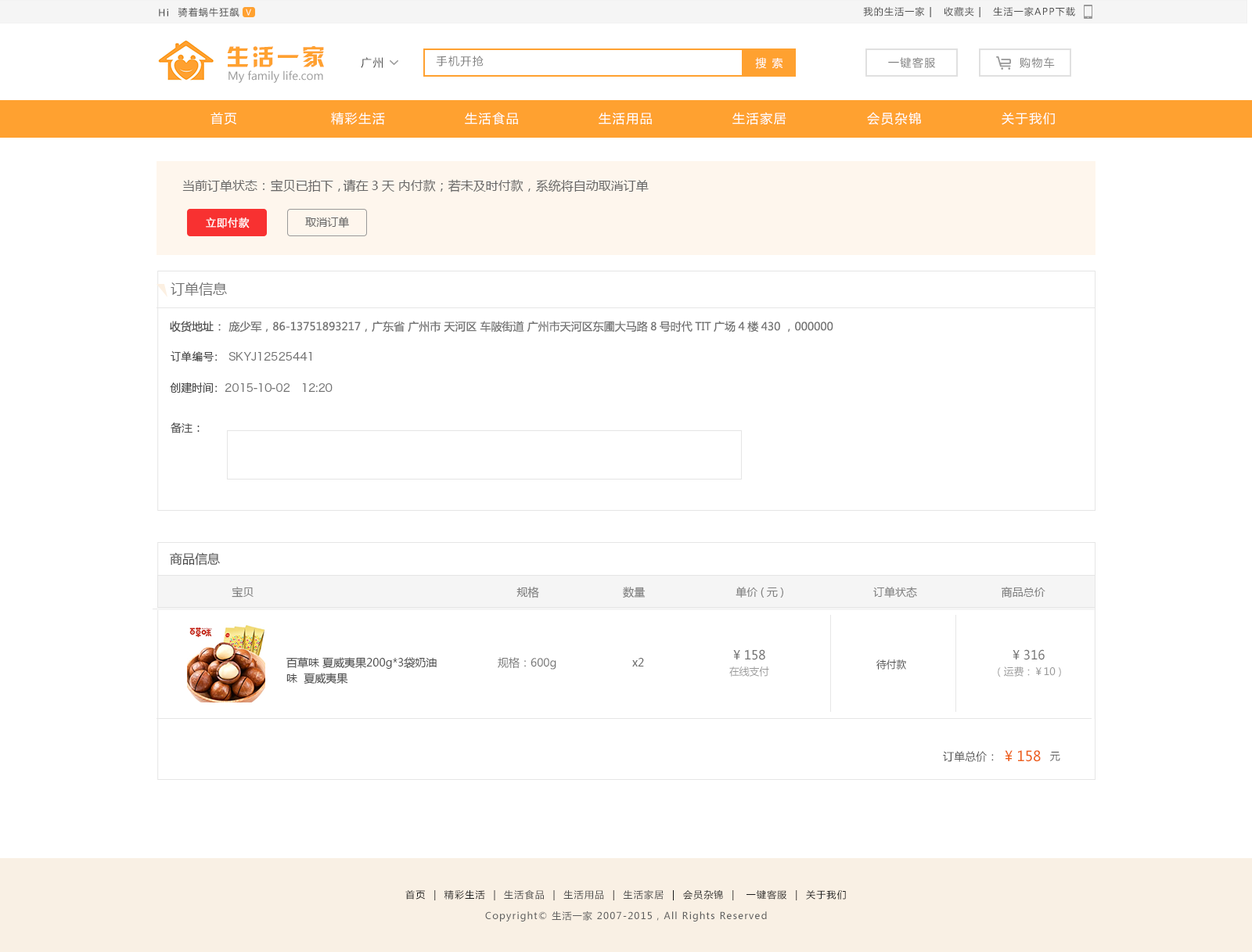
<style>
.page{position:relative;width:1252px;height:952px;background:#ffffff}
.page>*{position:absolute;margin:0}
.t1{font:9.4px "MicrosoftYaHei";letter-spacing:0.1em;color:#4d4d4d}
.t2{font:7.8px "MicrosoftYaHei";letter-spacing:0.1em;color:#ffffff}
.t3{font:22.7px "HYk2gj";letter-spacing:0.1em;color:#ffa130}
.t4{font:11px "MicrosoftYaHei";letter-spacing:0.1em;color:#4d4d4d}
.t5{font:11px "MicrosoftYaHei";letter-spacing:0.1em;color:#808080}
.t6{font:11px "MicrosoftYaHei";letter-spacing:0.1em;color:#ffffff}
.t7{font:11px "MicrosoftYaHei";color:#999999}
.t8{font:12.5px "MicrosoftYaHei";letter-spacing:0.1em;color:#ffffff}
.t9{font:12.9px "MicrosoftYaHei";letter-spacing:0.1em;color:#ffffff}
.t10{font:12.5px "MicrosoftYaHei";color:#666666}
.t11{font:11px "HiraginoSansGB-W3";color:#ffffff;font-weight:bold}
.t12{font:11px "MicrosoftYaHei";color:#666666}
.t13{font:14.1px "MicrosoftYaHei";color:#737373}
.t14{font:11px "MicrosoftYaHei";color:#737373}
.t15{font:11px "MicrosoftYaHei";color:#4d4d4d}
.t16{font:11px/31.3px "HiraginoSansGB-W3";color:#737373}
.t17{font:11px/31.3px "HiraginoSansGB-W3";color:#4d4d4d}
.t18{font:12.5px "MicrosoftYaHei";color:#4d4d4d}
.t19{font:11px "MicrosoftYaHei";color:#808080}
.t20{font:12.5px "MicrosoftYaHei";color:#737373}
.t21{font:11px/15.7px "MicrosoftYaHei";color:#4d4d4d}
.t22{font:11px "MicrosoftYaHei";color:#757575}
.t23{font:10.2px "MicrosoftYaHei";color:#4d4d4d}
.t24{font:10.2px "MicrosoftYaHei";color:#999999}
.t25{font:14.1px "MicrosoftYaHei";color:#ed601b}
.t26{font:9.4px "MicrosoftYaHei";letter-spacing:0.1em;color:#1a1a1a}
.t27{font:9.4px "MicrosoftYaHei";letter-spacing:0.1em;color:#5e5e5e}
</style>
<div class="page">
<p class="t1" style="left:159px;top:9px;width:9px;height:7px">Hi</p>
<p class="t1" style="left:178px;top:7px;width:61px;height:10px">骑着蜗牛狂飙</p>
<p class="t2" style="left:246px;top:9px;width:5px;height:7px">V</p>
<p class="t1" style="left:863px;top:7px;width:212px;height:10px">我的生活一家 |   收藏夹 |   生活一家APP下载</p>
<p class="t3" style="left:227px;top:46px;width:97px;height:22px">生活一家</p>
<p class="t4" style="left:361px;top:57px;width:22px;height:11px">广州</p>
<p class="t5" style="left:436px;top:56px;width:48px;height:11px">手机开抢</p>
<p class="t6" style="left:755px;top:57px;width:28px;height:12px">搜 索</p>
<p class="t5" style="left:888px;top:57px;width:48px;height:11px">一键客服</p>
<p class="t5" style="left:1020px;top:57px;width:35px;height:11px">购物车</p>
<p class="t7" style="left:229px;top:70px;width:94px;height:13px">My family life.com</p>
<p class="t8" style="left:211px;top:112px;width:25px;height:13px">首页</p>
<p class="t8" style="left:331px;top:112px;width:54px;height:13px">精彩生活</p>
<p class="t8" style="left:465px;top:112px;width:53px;height:13px">生活食品</p>
<p class="t8" style="left:599px;top:112px;width:53px;height:13px">生活用品</p>
<p class="t8" style="left:732px;top:112px;width:54px;height:13px">生活家居</p>
<p class="t9" style="left:867px;top:112px;width:54px;height:13px">会员杂锦</p>
<p class="t8" style="left:1002px;top:112px;width:53px;height:13px">关于我们</p>
<p class="t10" style="left:182px;top:179px;width:467px;height:14px">当前订单状态： 宝贝已拍下， 请在3天 内付款；若未及时付款，系统将自动取消订单</p>
<p class="t11" style="left:206px;top:218px;width:44px;height:11px">立即付款</p>
<p class="t12" style="left:305px;top:217px;width:44px;height:11px">取消订单</p>
<p class="t13" style="left:171px;top:283px;width:56px;height:13px">订单信息</p>
<p class="t14" style="left:170px;top:321px;width:663px;height:12px"><span class="t15">收货地址 ：  </span>庞少军，86-13751893217，广东省 广州市 天河区 车陂街道 广州市天河区东圃大马路8号时代TIT广场4楼430 ，000000</p>
<p class="t16" style="left:170px;top:351px;width:163px;height:42px"><span class="t17">订单编号： </span>SKYJ12525441<br><span class="t17">创建时间：</span>2015-10-02   12:20</p>
<p class="t15" style="left:171px;top:423px;width:29px;height:11px">备注 ：</p>
<p class="t18" style="left:170px;top:552px;width:50px;height:14px">商品信息</p>
<p class="t19" style="left:232px;top:587px;width:813px;height:12px">宝贝                                                                             规格                          数量                          单价(元)                          订单状态                          商品总价</p>
<p class="t20" style="left:733px;top:650px;width:32px;height:10px">¥ 158</p>
<p class="t20" style="left:1013px;top:650px;width:32px;height:10px">¥ 316</p>
<p class="t21" style="left:286px;top:657px;width:151px;height:28px">百草味 夏威夷果200g*3袋奶油<br>味  夏威夷果</p>
<p class="t22" style="left:498px;top:657px;width:58px;height:13px">规格：600g</p>
<p class="t12" style="left:632px;top:658px;width:12px;height:9px">x2</p>
<p class="t23" style="left:876px;top:660px;width:30px;height:10px">待付款</p>
<p class="t24" style="left:729px;top:667px;width:40px;height:10px">在线支付</p>
<p class="t24" style="left:998px;top:667px;width:63px;height:11px">（运费：￥10 )</p>
<p class="t15" style="left:943px;top:751px;width:51px;height:11px">订单总价：</p>
<p class="t25" style="left:1005px;top:750px;width:36px;height:12px">¥ 158</p>
<p class="t23" style="left:1050px;top:752px;width:10px;height:9px">元</p>
<p class="t26" style="left:405px;top:890px;width:441px;height:11px">首页  |  精彩生活  |  <span class="t1">生活食品</span>  |  <span class="t1">生活用品</span>  |  <span class="t1">生活家居</span>  |  会员杂锦  |   一键客服  |  关于我们</p>
<p class="t27" style="left:485px;top:911px;width:282px;height:11px">Copyright© 生活一家 2007-2015，All Rights Reserved</p>
</div>
